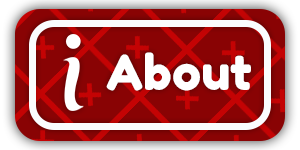
<style>
.page{position:relative;width:300px;height:150px;background:#890304}
.page>*{position:absolute;margin:0}
.t1{font:48.6px "ForkdokaOne-Regular";color:#ffffff}
</style>
<div class="page">
<p class="t1" style="left:106px;top:52px;width:145px;height:39px">About</p>
</div>
